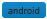
<style>
.page{position:relative;width:47px;height:19px;background:#ffffff}
.page>*{position:absolute;margin:0}
.t1{font:8.7px "ArialMT";letter-spacing:0.05em;color:#262824}
</style>
<div class="page">
<p class="t1" style="left:8px;top:7px;width:32px;height:7px">android</p>
</div>
